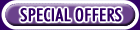
<style>
.page{position:relative;width:140px;height:30px;background:#ffffff}
.page>*{position:absolute;margin:0}
.t1{font:18px "FuturaBT-MediumCondensed";color:#310063;font-weight:bold}
</style>
<div class="page">
<p class="t1" style="left:20px;top:8px;width:102px;height:14px">SPECIAL OFFERS</p>
<p class="t1" style="left:20px;top:8px;width:102px;height:14px">SPECIAL OFFERS</p>
</div>
